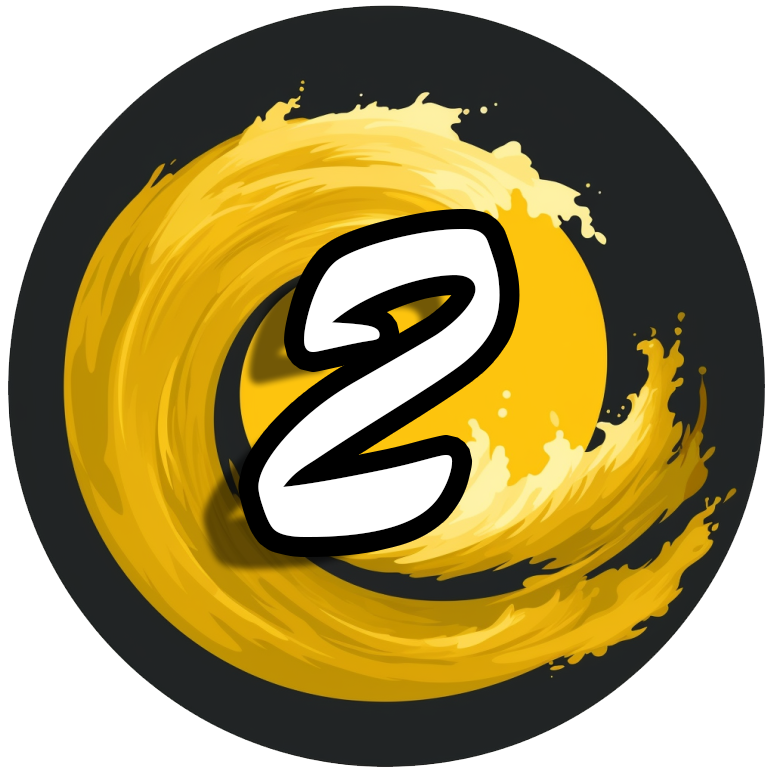
<style>
.page{position:relative;width:774px;height:774px;background:#ffffff}
.page>*{position:absolute;margin:0}
.t1{font:500px "BrushScriptMT";color:#ffffff}
</style>
<div class="page">
<p class="t1" style="left:258px;top:229px;width:242px;height:308px">2</p>
</div>
